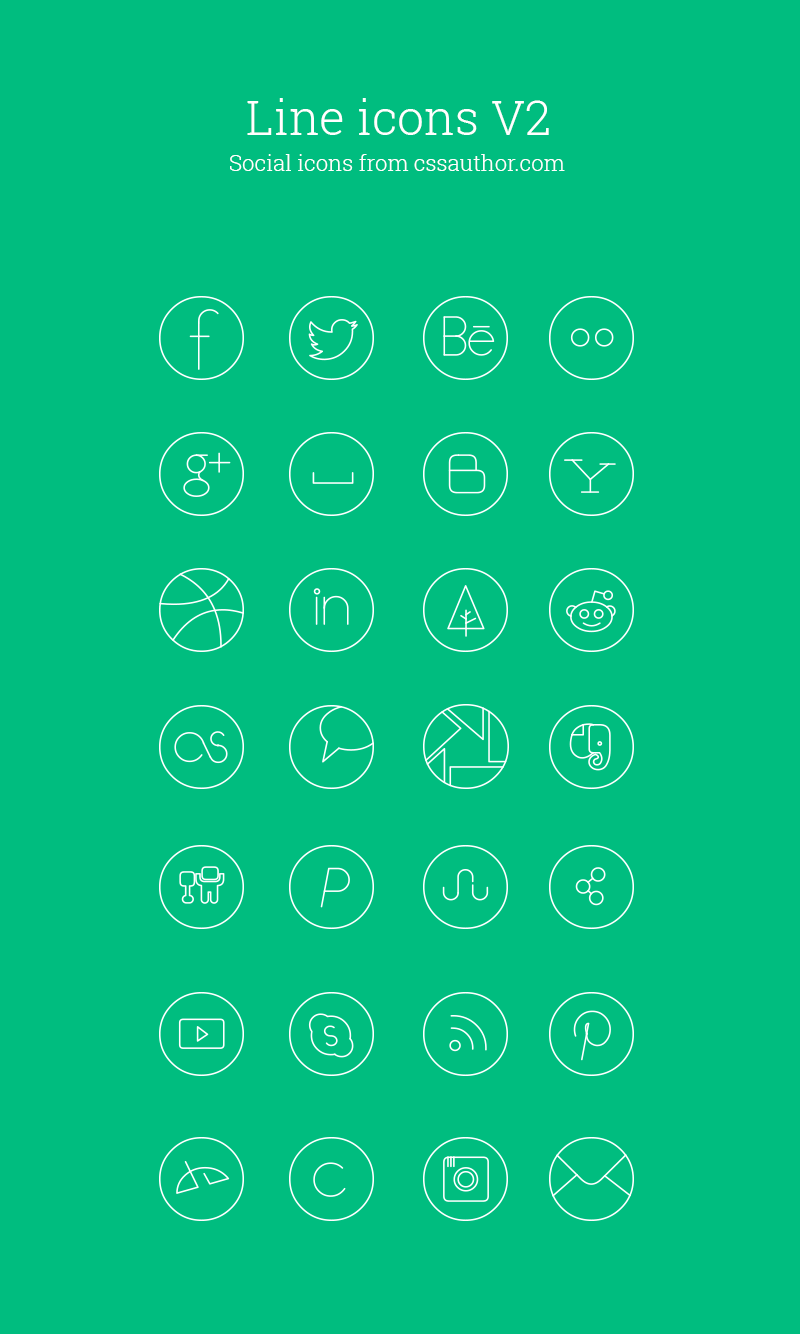
<style>
.page{position:relative;width:800px;height:1334px;background:#00bd7f}
.page>*{position:absolute;margin:0}
.t1{font:48px "RobotoSlab-Light";color:#ffffff}
.t2{font:22px "RobotoSlab-Light";color:#ffffff}
</style>
<div class="page">
<p class="t1" style="left:247px;top:98px;width:302px;height:37px">Line icons V2</p>
<p class="t2" style="left:230px;top:154px;width:335px;height:17px">Social icons from cssauthor.com</p>
</div>
